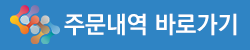
<style>
.page{position:relative;width:250px;height:50px;background:#2f84c4}
.page>*{position:absolute;margin:0}
.t1{font:24px "KoPubDotumBold";color:#ffffff}
</style>
<div class="page">
<p class="t1" style="left:64px;top:13px;width:173px;height:23px">주문내역 바로가기</p>
</div>
